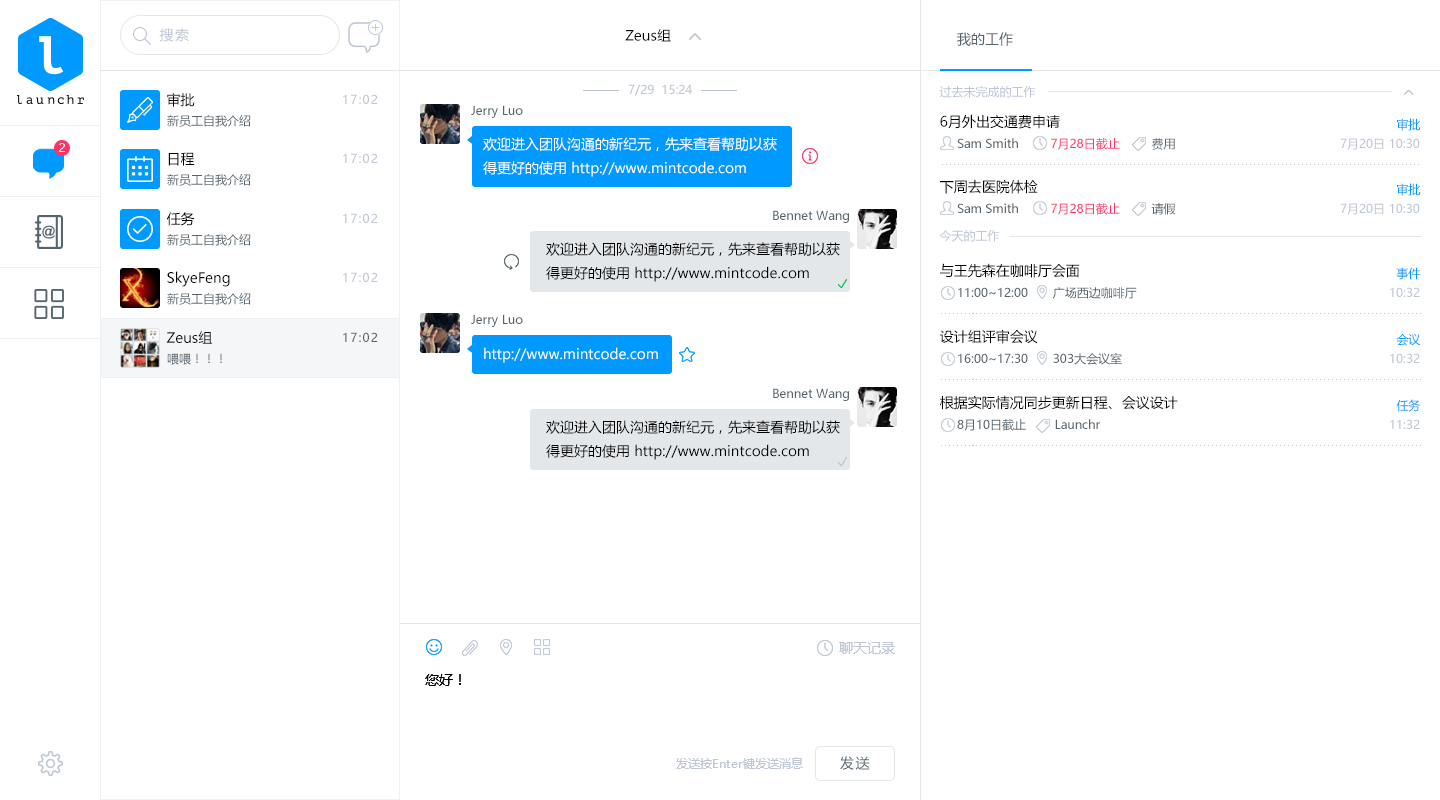
<style>
.page{position:relative;width:1440px;height:800px;background:#ffffff}
.page>*{position:absolute;margin:0}
.t1{font:14px "MicrosoftYaHei";letter-spacing:0.1em;color:#bec6d3}
.t2{font:14px "MicrosoftYaHei";color:#000000}
.t3{font:14px "MicrosoftYaHei";color:#56646d}
.t4{font:12px "MicrosoftYaHei";color:#bec6d3}
.t5{font:12px "MicrosoftYaHei";letter-spacing:0.1em;color:#bec6d3}
.t6{font:12px "MicrosoftYaHei";color:#56646d}
.t7{font:12px "MicrosoftYaHei";color:#0099ff}
.t8{font:14px/24px "MicrosoftYaHei";color:#ffffff}
.t9{font:12px "MicrosoftYaHei";letter-spacing:0.1em;color:#ffffff}
.t10{font:12px "MicrosoftYaHei";color:#ff3366}
.t11{font:14px/24px "MicrosoftYaHei";color:#000000}
.t12{font:12px "MicrosoftYaHei";letter-spacing:0.1em;color:#56646d}
.t13{font:12px "MicrosoftYaHei"}
.t14{font:14px "MicrosoftYaHei";color:#ffffff}
.t15{font:14px "MicrosoftYaHei";color:#bec6d3}
.t16{font:14px "MicrosoftYaHei";letter-spacing:0.1em;color:#56646d}
</style>
<div class="page">
<p class="t1" style="left:159px;top:28px;width:30px;height:14px">搜索</p>
<p class="t2" style="left:625px;top:29px;width:46px;height:13px">Zeus组</p>
<p class="t3" style="left:957px;top:32px;width:56px;height:14px">我的工作</p>
<p class="t4" style="left:628px;top:84px;width:64px;height:12px">7/29  15:24</p>
<p class="t4" style="left:939px;top:86px;width:97px;height:12px">过去未完成的工作</p>
<p class="t2" style="left:167px;top:93px;width:28px;height:14px">审批</p>
<p class="t5" style="left:343px;top:94px;width:35px;height:10px">17:02</p>
<p class="t6" style="left:471px;top:105px;width:52px;height:13px">Jerry Luo</p>
<p class="t6" style="left:167px;top:115px;width:84px;height:12px">新员工自我介绍</p>
<p class="t2" style="left:940px;top:114px;width:120px;height:15px">6月外出交通费申请</p>
<p class="t7" style="left:1397px;top:118px;width:24px;height:13px">审批</p>
<p class="t8" style="left:483px;top:137px;width:294px;height:40px">欢迎进入团队沟通的新纪元，先来查看帮助以获得更好的使用 http://www.mintcode.com</p>
<p class="t9" style="left:59px;top:143px;width:6px;height:9px">2</p>
<p class="t6" style="left:957px;top:138px;width:218px;height:12px">Sam Smith         <span class="t10">7月28日截止         </span>费用</p>
<p class="t4" style="left:1340px;top:138px;width:80px;height:12px">7月20日 10:30</p>
<p class="t2" style="left:168px;top:152px;width:27px;height:14px">日程</p>
<p class="t5" style="left:343px;top:153px;width:35px;height:10px">17:02</p>
<p class="t6" style="left:167px;top:174px;width:84px;height:12px">新员工自我介绍</p>
<p class="t2" style="left:940px;top:179px;width:98px;height:15px">下周去医院体检</p>
<p class="t7" style="left:1397px;top:183px;width:24px;height:13px">审批</p>
<p class="t6" style="left:957px;top:203px;width:219px;height:12px">Sam Smith         <span class="t10">7月28日截止         </span>请假</p>
<p class="t4" style="left:1340px;top:203px;width:80px;height:12px">7月20日 10:30</p>
<p class="t2" style="left:166px;top:212px;width:29px;height:14px">任务</p>
<p class="t5" style="left:343px;top:213px;width:35px;height:10px">17:02</p>
<p class="t6" style="left:773px;top:210px;width:76px;height:13px">Bennet Wang</p>
<p class="t4" style="left:939px;top:230px;width:61px;height:12px">今天的工作</p>
<p class="t6" style="left:167px;top:234px;width:84px;height:12px">新员工自我介绍</p>
<p class="t11" style="left:546px;top:242px;width:294px;height:40px">欢迎进入团队沟通的新纪元，先来查看帮助以获得更好的使用 http://www.mintcode.com</p>
<p class="t2" style="left:940px;top:263px;width:140px;height:15px">与王先森在咖啡厅会面</p>
<p class="t7" style="left:1396px;top:267px;width:25px;height:13px">事件</p>
<p class="t2" style="left:167px;top:271px;width:63px;height:16px">SkyeFeng</p>
<p class="t5" style="left:343px;top:272px;width:35px;height:10px">17:02</p>
<p class="t6" style="left:167px;top:293px;width:84px;height:12px">新员工自我介绍</p>
<p class="t6" style="left:958px;top:287px;width:179px;height:12px">11:00~12:00       广场西边咖啡厅</p>
<p class="t4" style="left:1390px;top:287px;width:30px;height:10px">10:32</p>
<p class="t6" style="left:471px;top:314px;width:52px;height:13px">Jerry Luo</p>
<p class="t2" style="left:940px;top:329px;width:98px;height:15px">设计组评审会议</p>
<p class="t2" style="left:166px;top:331px;width:46px;height:13px">Zeus组</p>
<p class="t12" style="left:343px;top:332px;width:35px;height:10px">17:02</p>
<p class="t7" style="left:1396px;top:333px;width:25px;height:13px">会议</p>
<p class="t13" style="left:167px;top:353px;width:55px;height:12px">喂喂！！！</p>
<p class="t14" style="left:484px;top:347px;width:174px;height:16px">http://www.mintcode.com</p>
<p class="t6" style="left:958px;top:352px;width:164px;height:13px">16:00~17:30       303大会议室</p>
<p class="t4" style="left:1390px;top:353px;width:30px;height:10px">10:32</p>
<p class="t6" style="left:773px;top:388px;width:76px;height:13px">Bennet Wang</p>
<p class="t2" style="left:940px;top:395px;width:238px;height:15px">根据实际情况同步更新日程、会议设计</p>
<p class="t7" style="left:1396px;top:399px;width:25px;height:13px">任务</p>
<p class="t11" style="left:546px;top:420px;width:294px;height:40px">欢迎进入团队沟通的新纪元，先来查看帮助以获得更好的使用 http://www.mintcode.com</p>
<p class="t6" style="left:957px;top:419px;width:143px;height:12px">8月10日截止        Launchr</p>
<p class="t4" style="left:1390px;top:419px;width:30px;height:10px">11:32</p>
<p class="t15" style="left:839px;top:642px;width:56px;height:12px">聊天记录</p>
<p class="t2" style="left:425px;top:674px;width:36px;height:12px">您好！</p>
<p class="t4" style="left:676px;top:757px;width:127px;height:12px">发送按Enter键发送消息</p>
<p class="t16" style="left:840px;top:756px;width:30px;height:14px">发送</p>
</div>
